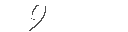
<style>
.page{position:relative;width:128px;height:32px;background:#ffffff}
.page>*{position:absolute;margin:0}
.t1{font:43px "DomDiagonalBT-Regular";letter-spacing:0.075em;color:#ffffff;scale:1.05 1}
</style>
<div class="page">
<p class="t1" style="left:28px;top:2px;width:18px;height:29px">9</p>
</div>
